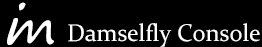
<style>
.page{position:relative;width:262px;height:47px;background:#000000}
.page>*{position:absolute;margin:0}
.t1{font:50px "SegoePrint";color:#ffffff;font-style:italic}
.t2{font:24px "Constantia";color:#ffffff}
</style>
<div class="page">
<p class="t1" style="left:7px;top:2px;width:19px;height:43px">i</p>
<p class="t1" style="left:7px;top:18px;width:47px;height:27px">m</p>
<p class="t2" style="left:68px;top:23px;width:192px;height:24px">Damselfly Console</p>
</div>
